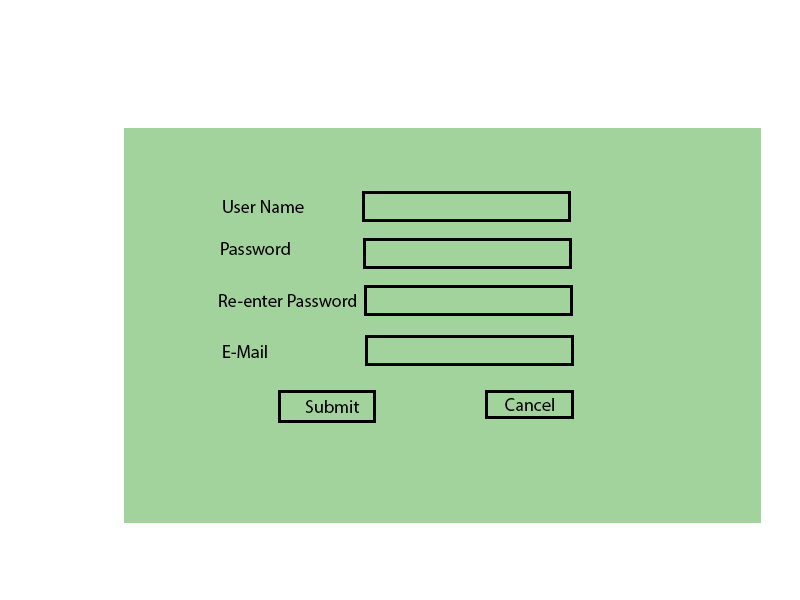
<style>
.page{position:relative;width:800px;height:600px;background:#a3d39c}
.page>*{position:absolute;margin:0}
.t1{font:18px "MyriadPro-Regular";color:#000000}
</style>
<div class="page">
<p class="t1" style="left:223px;top:200px;width:81px;height:13px">User Name</p>
<p class="t1" style="left:221px;top:242px;width:69px;height:13px">Password</p>
<p class="t1" style="left:219px;top:294px;width:137px;height:13px">Re-enter Password</p>
<p class="t1" style="left:223px;top:345px;width:44px;height:13px">E-Mail</p>
<p class="t1" style="left:305px;top:400px;width:55px;height:13px">Submit</p>
<p class="t1" style="left:505px;top:398px;width:49px;height:13px">Cancel</p>
</div>
